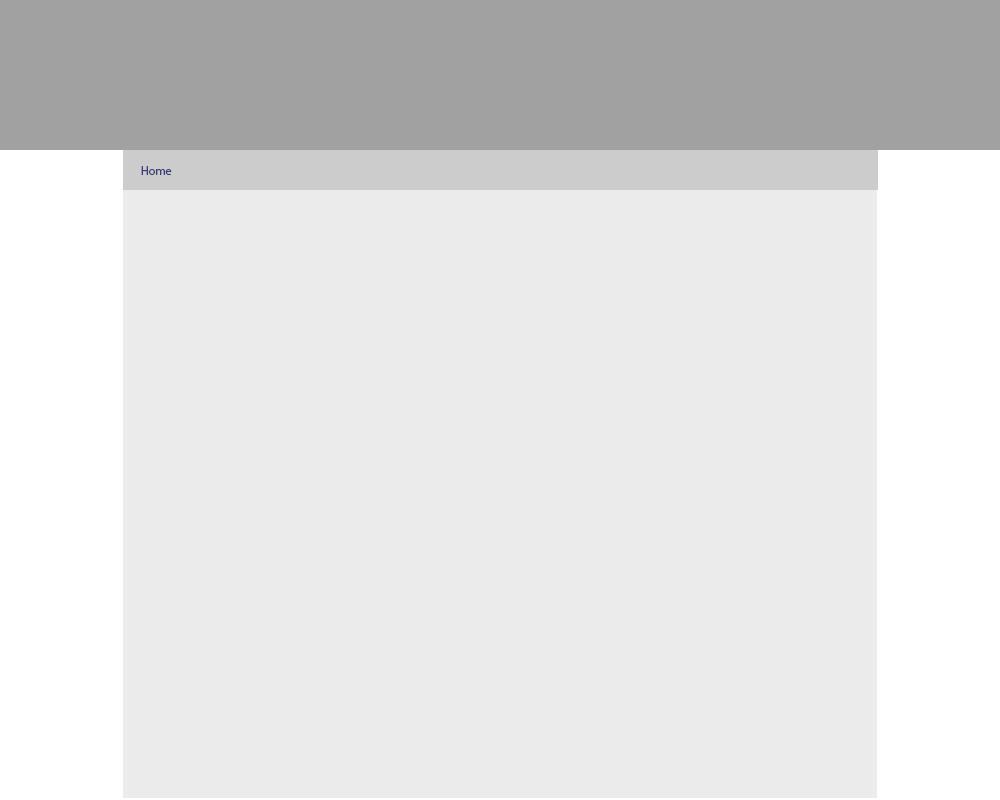
<style>
.page{position:relative;width:1000px;height:800px;background:#ebebeb}
.page>*{position:absolute;margin:0}
.t1{font:12px "MyriadPro-Regular";color:#393a7c}
</style>
<div class="page">
<p class="t1" style="left:141px;top:166px;width:31px;height:9px">Home</p>
</div>
